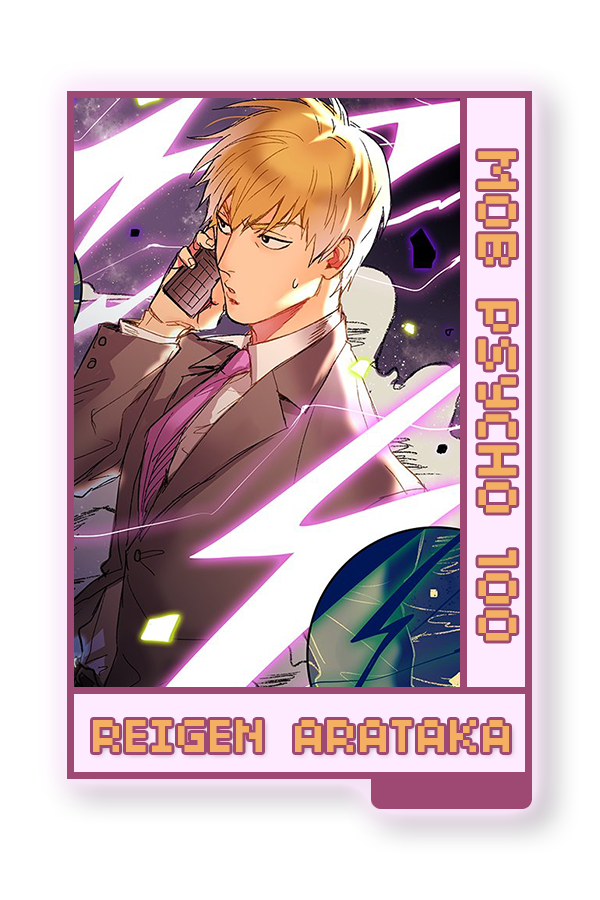
<style>
.page{position:relative;width:600px;height:900px;background:#ffffff}
.page>*{position:absolute;margin:0}
.t1{font:60.3px "04b03";color:#f4af62}
.t2{font:51.9px "04b03";color:#f4af62}
</style>
<div class="page">
<p class="t1" style="left:478px;top:151px;width:39px;height:490px;rotate:90deg">MOB PSYCHO 100</p>
<p class="t2" style="left:93px;top:720px;width:416px;height:32px">REIGEN ARATAKA</p>
</div>
